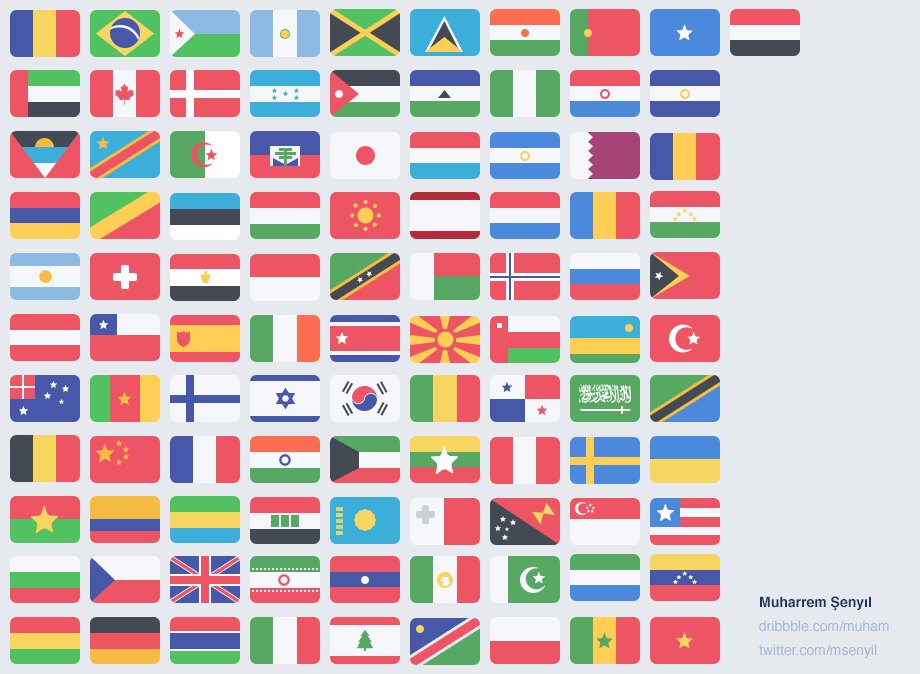
<style>
.page{position:relative;width:920px;height:674px;background:#e6e9ed}
.page>*{position:absolute;margin:0}
.t1{font:14px/24px "Helvetica";color:#a1b7d3}
.t2{font:14px "Helvetica-Bold";color:#173966}
.t3{font:14px "Helvetica";color:#a1b7d3}
</style>
<div class="page">
<p class="t1" style="left:759px;top:596px;width:130px;height:62px"><span class="t2">Muharrem Şenyıl<br></span><span class="t3">dribbble.com/muha</span>m<br>twitter.com/msenyi<span class="t3">l</span></p>
</div>
